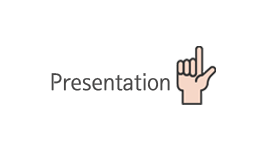
<style>
.page{position:relative;width:280px;height:150px;background:#ffffff}
.page>*{position:absolute;margin:0}
.t1{font:24px "SeN-CM";color:#464545}
</style>
<div class="page">
<p class="t1" style="left:51px;top:73px;width:119px;height:18px">Presentation</p>
</div>
